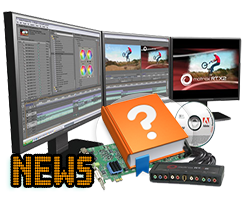
<style>
.page{position:relative;width:250px;height:200px;background:#ffffff}
.page>*{position:absolute;margin:0}
.t1{font:42.4px "HP-Yard-Regular";color:#ff9e00;scale:0.68 1}
</style>
<div class="page">
<p class="t1" style="left:13px;top:156px;width:79px;height:30px">NEWS</p>
</div>
